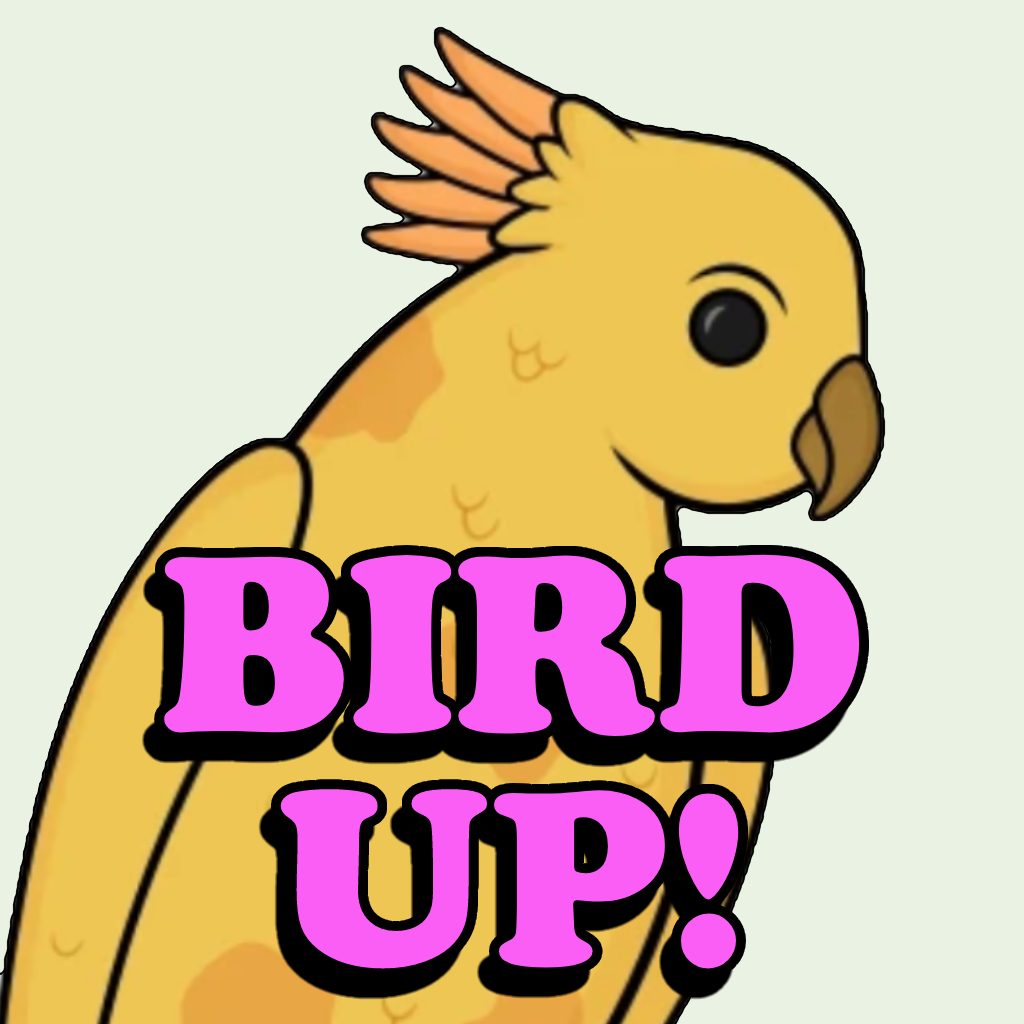
<style>
.page{position:relative;width:1024px;height:1024px;background:#eaf2e3}
.page>*{position:absolute;margin:0}
.t1{font:260px "CooperBlack";color:#fb5ef5}
</style>
<div class="page">
<p class="t1" style="left:164px;top:554px;width:696px;height:415px;text-align:center">BIRD<br>UP!</p>
</div>
